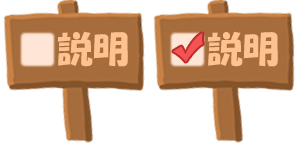
<style>
.page{position:relative;width:300px;height:150px;background:#ffffff}
.page>*{position:absolute;margin:0}
.t1{font:36px "HGSoeiKakupoptai";color:#fec290}
</style>
<div class="page">
<p class="t1" style="left:57px;top:31px;width:71px;height:36px">説明</p>
<p class="t1" style="left:207px;top:31px;width:71px;height:36px">説明</p>
</div>
